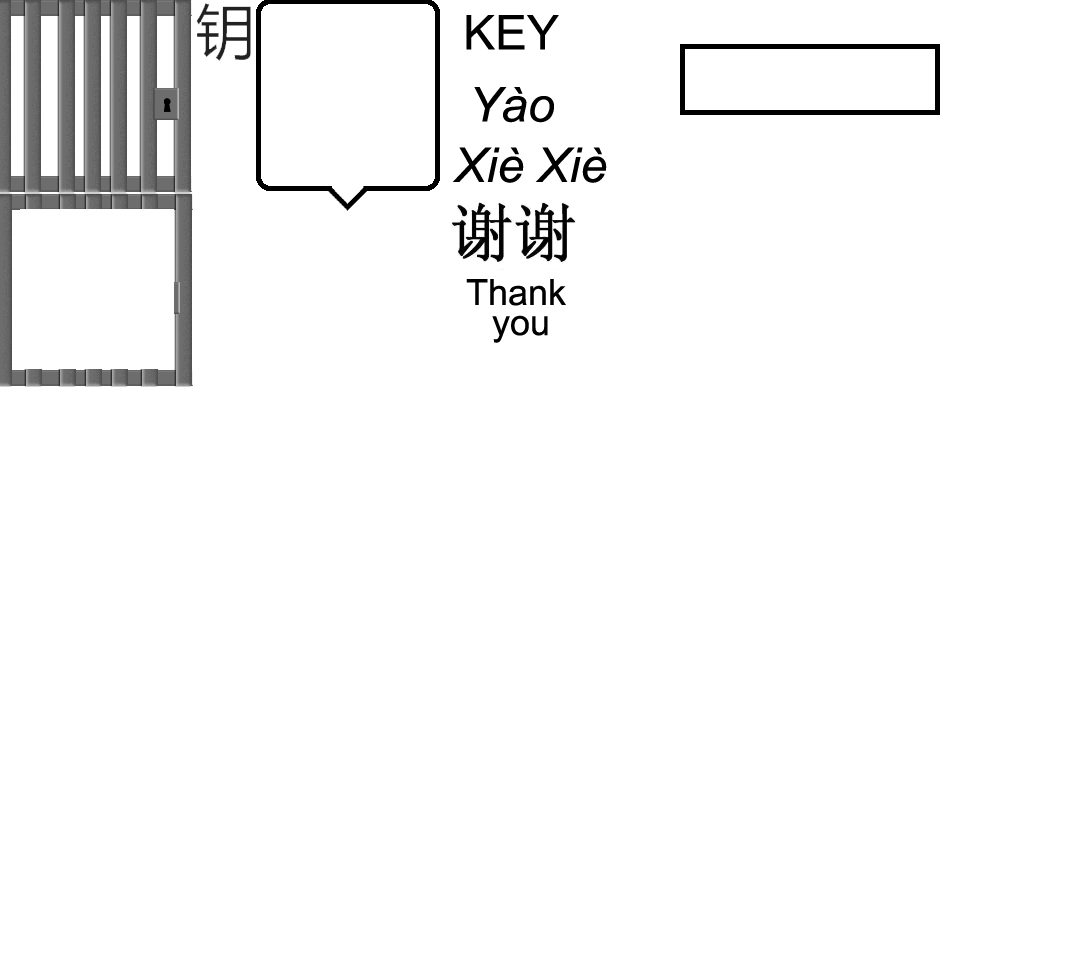
<style>
.page{position:relative;width:1080px;height:960px;background:#ffffff}
.page>*{position:absolute;margin:0}
.t1{font:48px "ArialMT";color:#000000}
.t2{font:48px "Arial-ItalicMT";color:#000000}
.t3{font:36px/30px "ArialMT";color:#000000}
</style>
<div class="page">
<p class="t1" style="left:466px;top:15px;width:93px;height:35px">KEY</p>
<p class="t2" style="left:474px;top:87px;width:80px;height:36px">Yào</p>
<p class="t2" style="left:452px;top:147px;width:155px;height:36px">Xiè Xiè</p>
<p class="t3" style="left:466px;top:279px;width:100px;height:64px;text-align:center">Thank<br> you</p>
</div>
